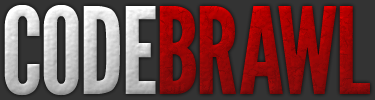
<style>
.page{position:relative;width:375px;height:100px}
.page>*{position:absolute;margin:0}
.t1{font:120px "LeagueGothic";letter-spacing:-0.025em}
.t2{font:120px "LeagueGothic"}
.t3{font:120px "LeagueGothic";letter-spacing:-0.05em}
</style>
<div class="page">
<p class="t1" style="left:4px;top:5px;width:366px;height:91px">CODEB<span class="t2">R</span><span class="t3">A</span>WL</p>
</div>
